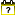
<style>
.page{position:relative;width:16px;height:16px;background:#ffffff}
.page>*{position:absolute;margin:0}
.t1{font:7.6px "Arial-BoldMT";color:#000000}
</style>
<div class="page">
<p class="t1" style="left:6px;top:7px;width:5px;height:6px">?</p>
</div>
